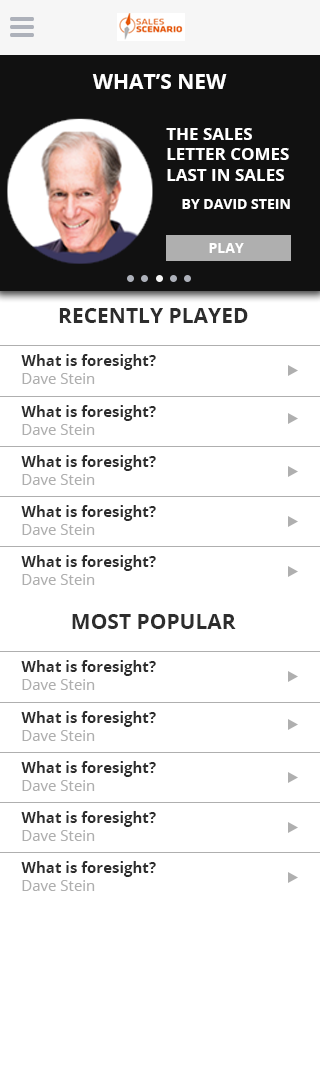
<style>
.page{position:relative;width:320px;height:1080px;background:#ffffff}
.page>*{position:absolute;margin:0}
.t1{font:21px "OpenSans-Bold";color:#ffffff;text-transform:uppercase}
.t2{font:17px "OpenSans-Bold";color:#ffffff;text-transform:uppercase}
.t3{font:14px "OpenSans-Bold";color:#ffffff;text-transform:uppercase}
.t4{font:21px "OpenSans-Bold";color:#2d2d2d;text-transform:uppercase}
.t5{font:15px "OpenSans-Bold";color:#2d2d2d}
.t6{font:15px "OpenSans";color:#afafaf}
</style>
<div class="page">
<p class="t1" style="left:92px;top:74px;width:135px;height:15px">What’s new</p>
<p class="t2" style="left:166px;top:128px;width:123px;height:53px">the sales letter comes last in sales</p>
<p class="t3" style="left:182px;top:199px;width:108px;height:10px">by David stein</p>
<p class="t3" style="left:209px;top:243px;width:35px;height:10px">Play</p>
<p class="t4" style="left:59px;top:308px;width:189px;height:15px">Recently played</p>
<p class="t5" style="left:21px;top:354px;width:135px;height:16px">What is foresight?</p>
<p class="t6" style="left:22px;top:373px;width:73px;height:11px">Dave Stein</p>
<p class="t5" style="left:21px;top:405px;width:135px;height:16px">What is foresight?</p>
<p class="t6" style="left:22px;top:424px;width:73px;height:11px">Dave Stein</p>
<p class="t5" style="left:21px;top:455px;width:135px;height:16px">What is foresight?</p>
<p class="t6" style="left:22px;top:474px;width:73px;height:11px">Dave Stein</p>
<p class="t5" style="left:21px;top:505px;width:135px;height:16px">What is foresight?</p>
<p class="t6" style="left:22px;top:524px;width:73px;height:11px">Dave Stein</p>
<p class="t5" style="left:21px;top:555px;width:135px;height:16px">What is foresight?</p>
<p class="t6" style="left:22px;top:574px;width:73px;height:11px">Dave Stein</p>
<p class="t4" style="left:72px;top:614px;width:164px;height:15px">Most popular</p>
<p class="t5" style="left:21px;top:660px;width:135px;height:16px">What is foresight?</p>
<p class="t6" style="left:22px;top:679px;width:73px;height:11px">Dave Stein</p>
<p class="t5" style="left:21px;top:711px;width:135px;height:16px">What is foresight?</p>
<p class="t6" style="left:22px;top:730px;width:73px;height:11px">Dave Stein</p>
<p class="t5" style="left:21px;top:761px;width:135px;height:16px">What is foresight?</p>
<p class="t6" style="left:22px;top:780px;width:73px;height:11px">Dave Stein</p>
<p class="t5" style="left:21px;top:811px;width:135px;height:16px">What is foresight?</p>
<p class="t6" style="left:22px;top:830px;width:73px;height:11px">Dave Stein</p>
<p class="t5" style="left:21px;top:861px;width:135px;height:16px">What is foresight?</p>
<p class="t6" style="left:22px;top:880px;width:73px;height:11px">Dave Stein</p>
</div>
